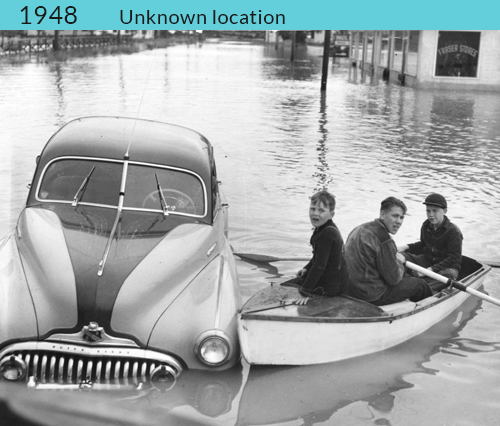
<style>
.page{position:relative;width:500px;height:426px}
.page>*{position:absolute;margin:0}
.t1{font:25px "Lato-Regular";letter-spacing:0.025em;color:#1a1a1a}
.t2{font:20px "Lato-Regular";letter-spacing:0.025em;color:#1a1a1a}
</style>
<div class="page">
<p class="t1" style="left:20px;top:6px;width:57px;height:18px">1948</p>
<p class="t2" style="left:120px;top:10px;width:165px;height:14px">Unknown location</p>
</div>
